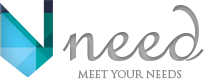
<style>
.page{position:relative;width:204px;height:79px;background:#ffffff}
.page>*{position:absolute;margin:0}
.t1{font:120px "FrenchScriptMT";color:#9e9e9e}
.t2{font:120px "FrenchScriptMT";color:#969696}
.t3{font:10px "TrajanPro-Regular";color:#8b8b8b;text-transform:uppercase}
</style>
<div class="page">
<p class="t1" style="left:62px;top:6px;width:142px;height:56px">need</p>
<p class="t2" style="left:62px;top:5px;width:142px;height:56px">need</p>
<p class="t3" style="left:78px;top:71px;width:104px;height:8px">meet YOUR NEEDS</p>
<p class="t3" style="left:78px;top:70px;width:104px;height:8px">meet YOUR NEEDS</p>
</div>
